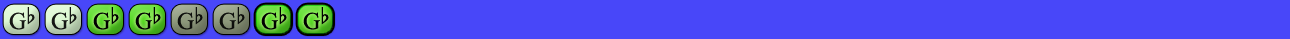
<style>
.page{position:relative;width:1290px;height:39px;background:#4847f9}
.page>*{position:absolute;margin:0}
.t1{font:24px "OpusChords";color:#000000}
</style>
<div class="page">
<p class="t1" style="left:9px;top:7px;width:26px;height:23px;opacity:0.9">Gb</p>
<p class="t1" style="left:51px;top:7px;width:26px;height:23px;opacity:0.9">Gb</p>
<p class="t1" style="left:93px;top:7px;width:26px;height:23px">Gb</p>
<p class="t1" style="left:135px;top:7px;width:26px;height:23px">Gb</p>
<p class="t1" style="left:177px;top:7px;width:26px;height:23px;opacity:0.9">Gb</p>
<p class="t1" style="left:219px;top:7px;width:26px;height:23px;opacity:0.9">Gb</p>
<p class="t1" style="left:261px;top:7px;width:26px;height:23px">Gb</p>
<p class="t1" style="left:303px;top:7px;width:26px;height:23px">Gb</p>
</div>
